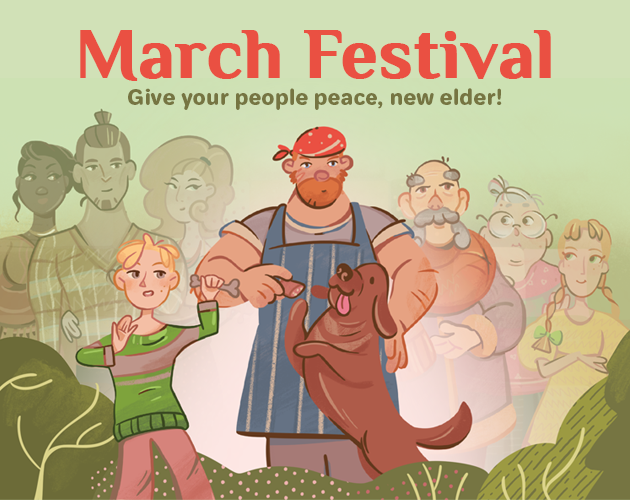
<style>
.page{position:relative;width:630px;height:500px}
.page>*{position:absolute;margin:0}
.t1{font:70.8px "Philosopher-Bold";color:#ea5042;font-weight:bold}
.t2{font:20.8px "Jellee-Roman";color:#767542}
</style>
<div class="page">
<p class="t1" style="left:80px;top:30px;width:471px;height:51px">March Festival</p>
<p class="t2" style="left:128px;top:88px;width:374px;height:22px">Give your people peace, new elder!</p>
</div>
